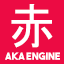
<style>
.page{position:relative;width:64px;height:64px;background:#ec0b43}
.page>*{position:absolute;margin:0}
.t1{font:48px "MS-UIGothic";color:#ffffff}
.t2{font:10px "TheBoldFont";color:#ffffff}
</style>
<div class="page">
<p class="t1" style="left:11px;top:4px;width:42px;height:44px">赤</p>
<p class="t2" style="left:5px;top:52px;width:55px;height:8px">AKA ENGINE</p>
</div>
